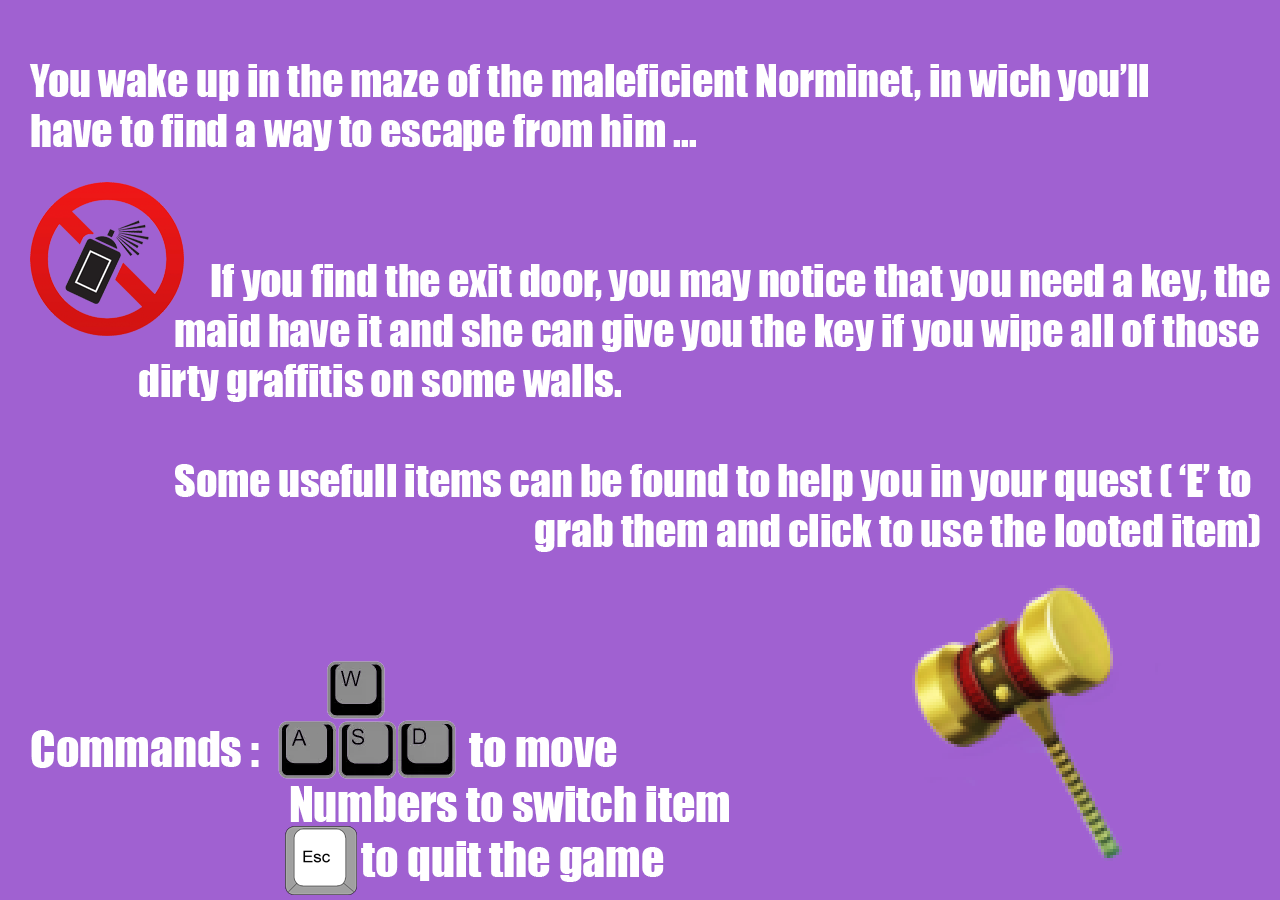
<style>
.page{position:relative;width:1280px;height:900px;background:#a061d1}
.page>*{position:absolute;margin:0}
.t1{font:41.7px "Impact";color:#ffffff}
.t2{font:45.8px "Impact";color:#ffffff}
</style>
<div class="page">
<p class="t1" style="left:29px;top:64px;width:1241px;height:818px">You wake up in the maze of the maleficient Norminet, in wich you’ll<br>have to find a way to escape from him ...<br><br><br>     If you find the exit door, you may notice that you need a key, the<br>    maid have it and she can give you the key if you wipe all of those<br>   dirty graffitis on some walls.<br><br>    Some usefull items can be found to help you in your quest ( ‘E’ to<br>              grab them and click to use the looted item)<br><span class="t2"><br><br><br>Commands :                          to move<br>                                Numbers to switch item<br>                                         to quit the game</span></p>
</div>
